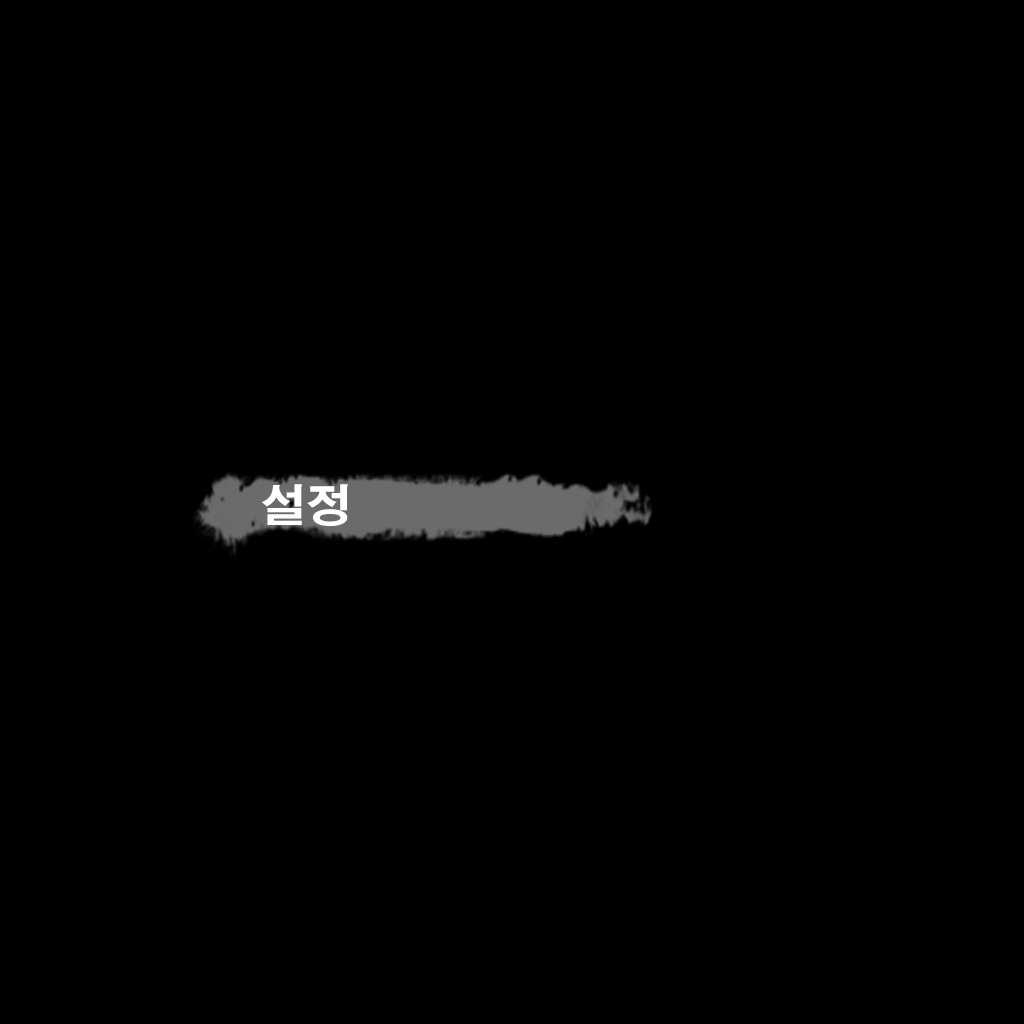
<style>
.page{position:relative;width:1024px;height:1024px;background:#000000}
.page>*{position:absolute;margin:0}
.t1{font:44.3px "HYgtrE";color:#ffffff;scale:1.04 1}
</style>
<div class="page">
<p class="t1" style="left:261px;top:484px;width:87px;height:42px">설정</p>
</div>
